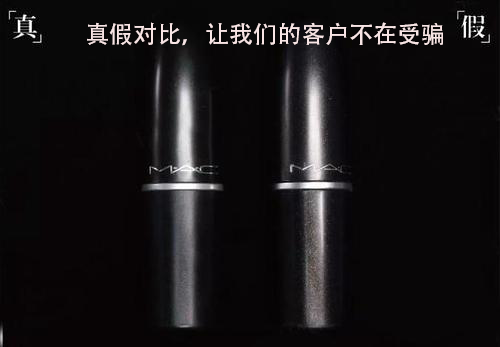
<style>
.page{position:relative;width:500px;height:347px;background:#080607}
.page>*{position:absolute;margin:0}
.t1{font:24px "AdobeHeitiStd-Regular";color:#f8e5e5}
</style>
<div class="page">
<p class="t1" style="left:87px;top:22px;width:356px;height:24px">真假对比，让我们的客户不在受骗</p>
</div>
